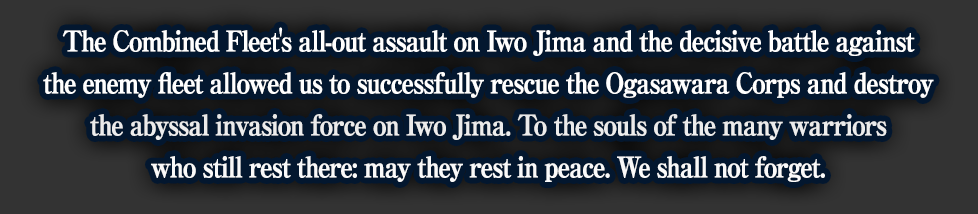
<style>
.page{position:relative;width:978px;height:214px;background:#03172f}
.page>*{position:absolute;margin:0}
.t1{font:28px/42px "RyuminPro-ExBold";letter-spacing:-0.08em;color:#ffffff;font-weight:bold;scale:0.9 1}
</style>
<div class="page">
<p class="t1" style="left:43px;top:27px;width:891px;height:155px;text-align:center">The Combined Fleet's all-out assault on Iwo Jima and the decisive battle against<br>the enemy fleet allowed us to successfully rescue the Ogasawara Corps and destroy<br>the abyssal invasion force on Iwo Jima. To the souls of the many warriors<br>who still rest there: may they rest in peace. We shall not forget.</p>
</div>
